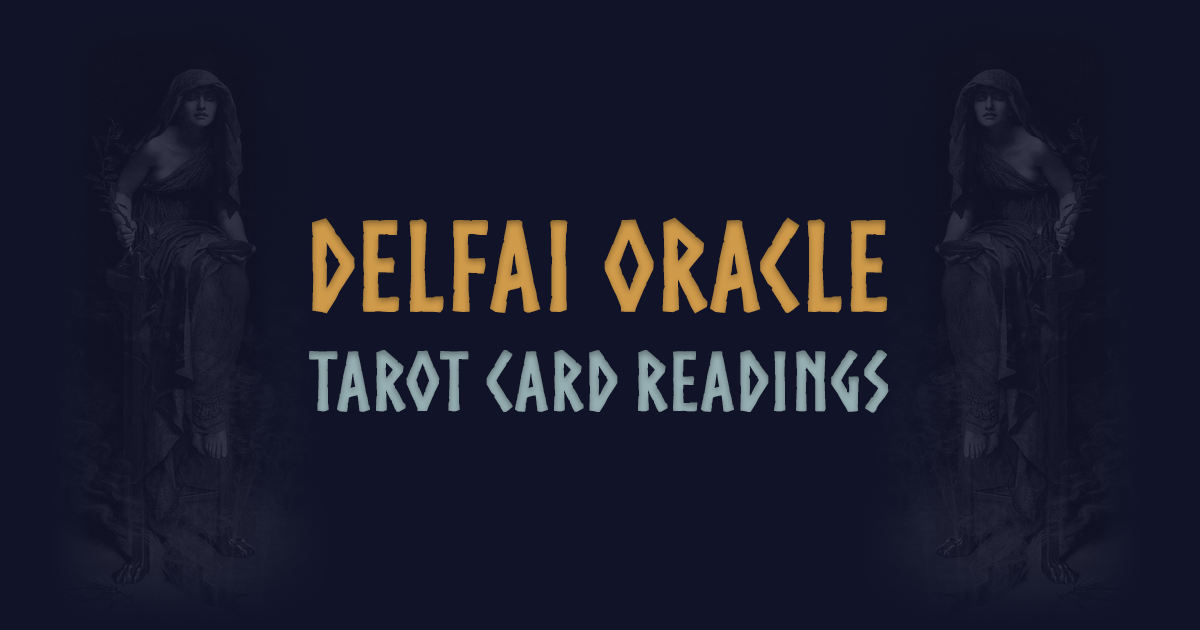
<style>
.page{position:relative;width:1200px;height:630px;background:#111328}
.page>*{position:absolute;margin:0}
.t1{font:80px/100px "Norse-Bold";color:#96afb3;font-weight:bold}
.t2{font:120px/100px "Norse-Bold";color:#cf9a4a;font-weight:bold}
</style>
<div class="page">
<p class="t1" style="left:309px;top:217px;width:580px;height:196px;text-align:center"><span class="t2">DELFAI ORACLE<br></span>TAROT card READINGS</p>
</div>
